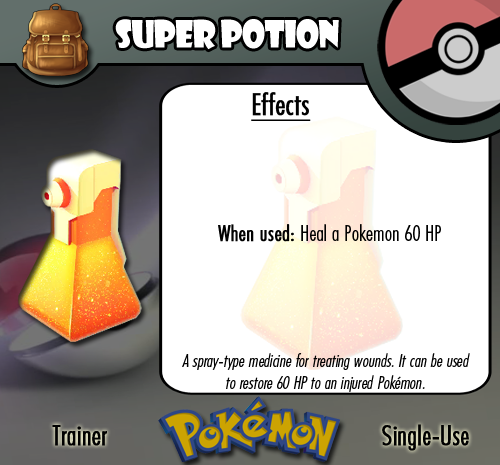
<style>
.page{position:relative;width:500px;height:465px;background:#ffffff}
.page>*{position:absolute;margin:0}
.t1{font:36.7px "ShowcardGothic-Reg";letter-spacing:-0.025em;color:#ffffff;scale:0.91 1}
.t2{font:22.2px "FuturaCondensedBQ-Light";color:#010101}
.t3{font:27.8px "FuturaCondensedBQ-Light";color:#010101;font-weight:bold}
.t4{font:30.6px "FuturaCondensedBQ-Light";color:#010101;font-weight:bold;text-decoration:underline}
.t5{font:22.2px "FuturaCondensedBQ-Light";color:#010101;font-weight:bold}
.t6{font:18.1px "FuturaCondensedBQ-Light";color:#010101;font-style:italic}
</style>
<div class="page">
<p class="t1" style="left:115px;top:19px;width:224px;height:31px">Super Potion</p>
<p class="t2" style="left:218px;top:92px;width:223px;height:150px"><span class="t3">  </span><span class="t4">Effects<br><br><br><br></span><span class="t5">When used: </span>Heal a Pokemon 60 HP</p>
<p class="t6" style="left:182px;top:353px;width:288px;height:39px;text-align:center">A spray-type medicine for treating wounds. It can be used to restore 60 HP to an injured Pokémon.</p>
<p class="t3" style="left:52px;top:425px;width:55px;height:21px">Trainer</p>
<p class="t3" style="left:382px;top:424px;width:87px;height:27px">Single-Use</p>
</div>
